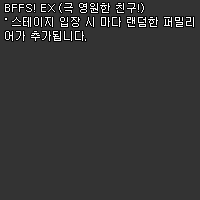
<style>
.page{position:relative;width:200px;height:200px;background:#333333}
.page>*{position:absolute;margin:0}
.t1{font:11px/14px "Dotum";color:#ffffff}
</style>
<div class="page">
<p class="t1" style="left:5px;top:3px;width:189px;height:38px">BFFS! EX (극 영원한 친구!)<br>˚ 스테이지 입장 시 마다 랜덤한 퍼밀리<br>어가 추가됩니다.</p>
</div>
